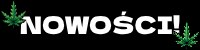
<style>
.page{position:relative;width:200px;height:50px;background:#000000}
.page>*{position:absolute;margin:0}
.t1{font:24px "DelaGothicOne-Regular";color:#ffffff}
</style>
<div class="page">
<p class="t1" style="left:20px;top:11px;width:160px;height:24px">NOWOŚCI!</p>
</div>
